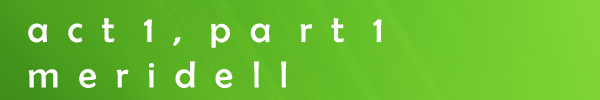
<style>
.page{position:relative;width:600px;height:100px}
.page>*{position:absolute;margin:0}
.t1{font:38px "BerlinSansFB-Reg";color:#ffffff}
</style>
<div class="page">
<p class="t1" style="left:28px;top:18px;width:354px;height:70px">a  c  t   1  ,   p  a   r  t   1<br>m  e  r  i  d  e  l  l</p>
</div>
